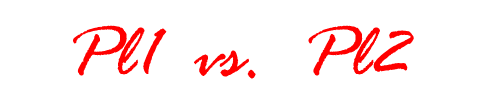
<style>
.page{position:relative;width:500px;height:100px;background:#ffffff}
.page>*{position:absolute;margin:0}
.t1{font:78px "RageItalic";color:#ff0000}
</style>
<div class="page">
<p class="t1" style="left:73px;top:25px;width:341px;height:54px">Pl1  vs.  Pl2</p>
</div>
